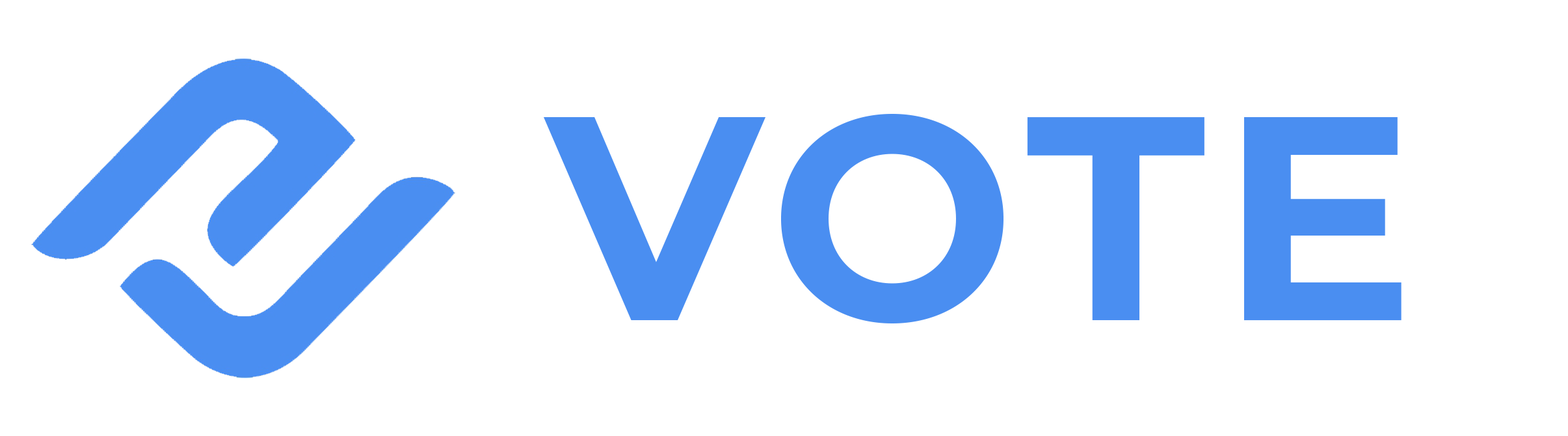
<style>
.page{position:relative;width:1568px;height:436px;background:#ffffff}
.page>*{position:absolute;margin:0}
.t1{font:289.9px "Montserrat-Bold";letter-spacing:0.05em;color:#4a8ef1}
</style>
<div class="page">
<p class="t1" style="left:544px;top:114px;width:858px;height:209px">VOTE</p>
</div>
